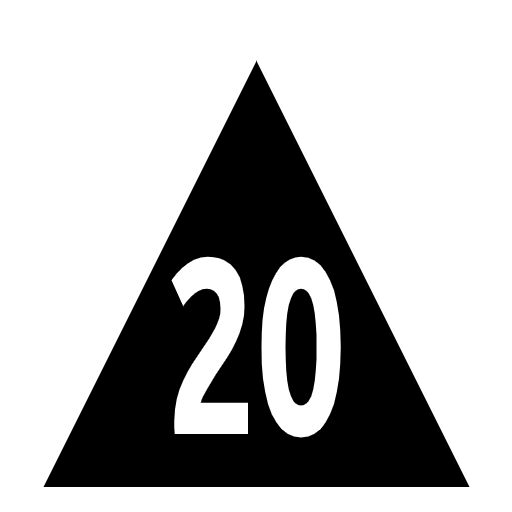
<style>
.page{position:relative;width:512px;height:512px;background:#ffffff}
.page>*{position:absolute;margin:0}
.t1{font:250px "Ubuntu-Bold";color:#ffffff;scale:0.63 1}
</style>
<div class="page">
<p class="t1" style="left:171px;top:256px;width:170px;height:182px">20</p>
</div>
